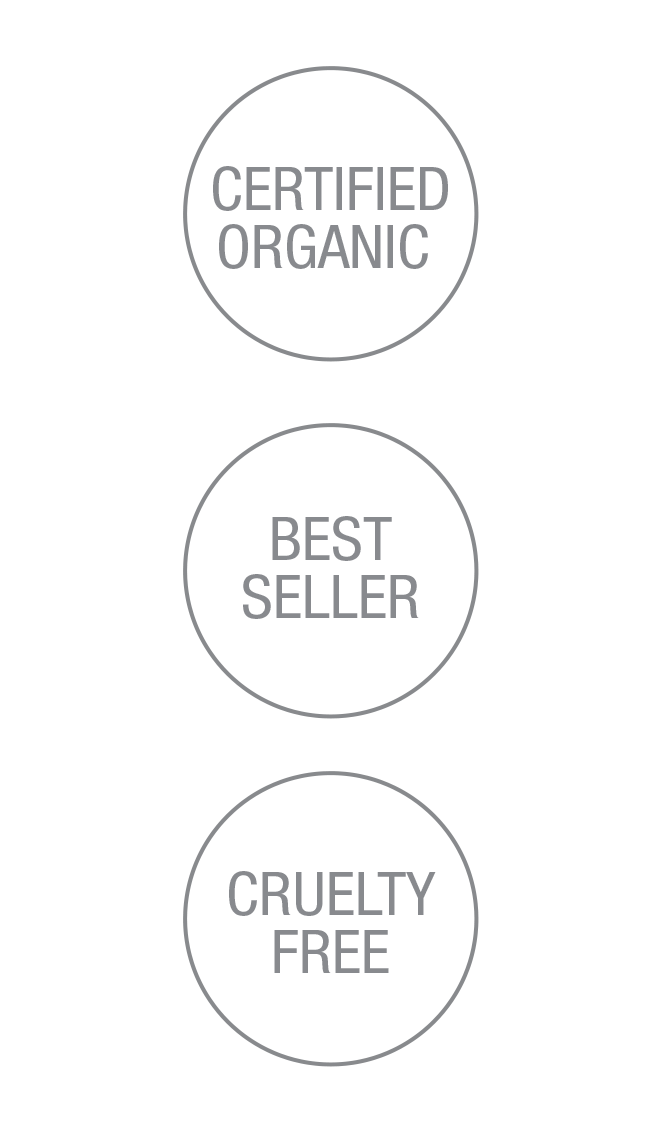
<style>
.page{position:relative;width:653px;height:1121px;background:#ffffff}
.page>*{position:absolute;margin:0}
.t1{font:60px/58px "HelveticaNeueLTStd-Cn";color:#75777b;text-transform:uppercase;scale:1.05 1}
</style>
<div class="page">
<p class="t1" style="left:213px;top:166px;width:235px;height:103px;text-align:center">Certified<br>organic</p>
<p class="t1" style="left:243px;top:516px;width:176px;height:103px;text-align:center">BEST<br>SELLER</p>
<p class="t1" style="left:229px;top:871px;width:207px;height:102px;text-align:center">CRUELTY<br>FREE</p>
</div>
